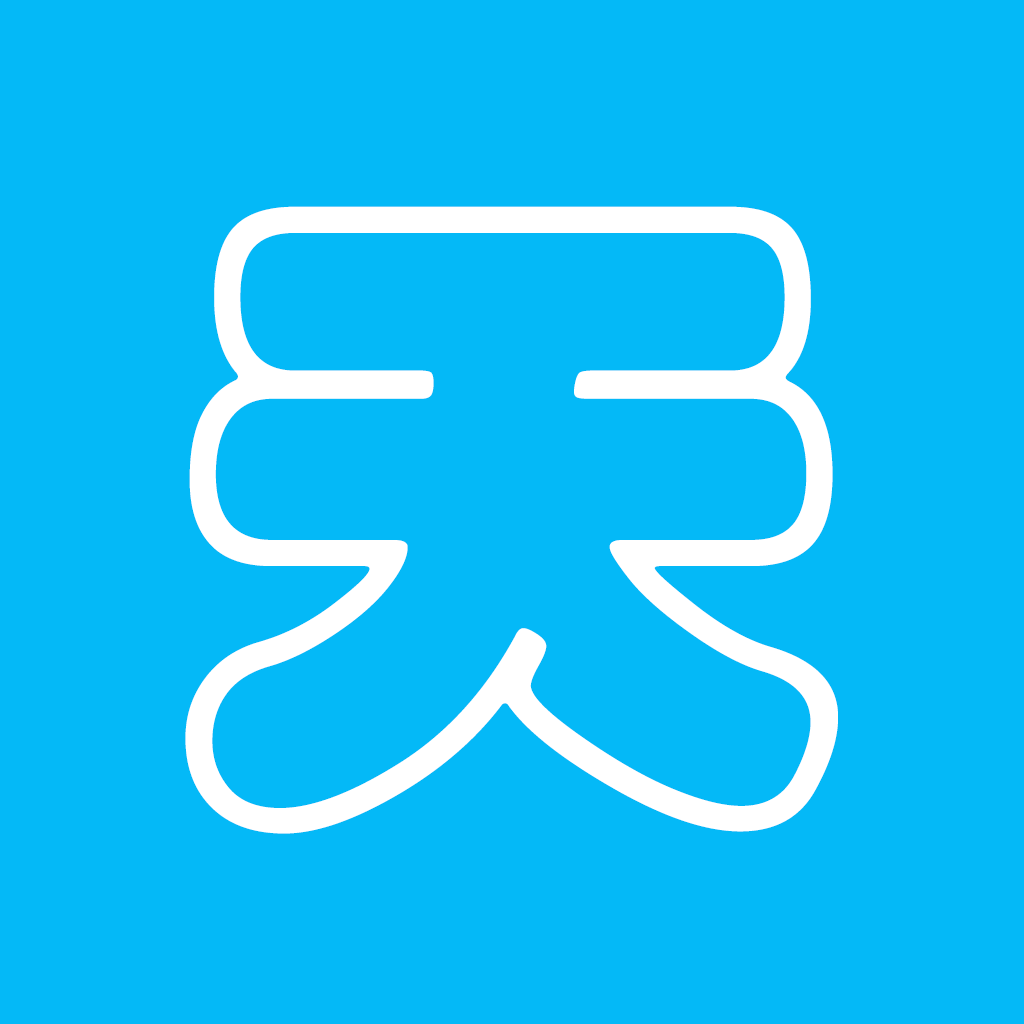
<style>
.page{position:relative;width:1024px;height:1024px;background:#04b9f7}
.page>*{position:absolute;margin:0}
.t1{font:700px "STCaiyun";color:#ffffff}
</style>
<div class="page">
<p class="t1" style="left:185px;top:206px;width:653px;height:628px">天</p>
</div>
